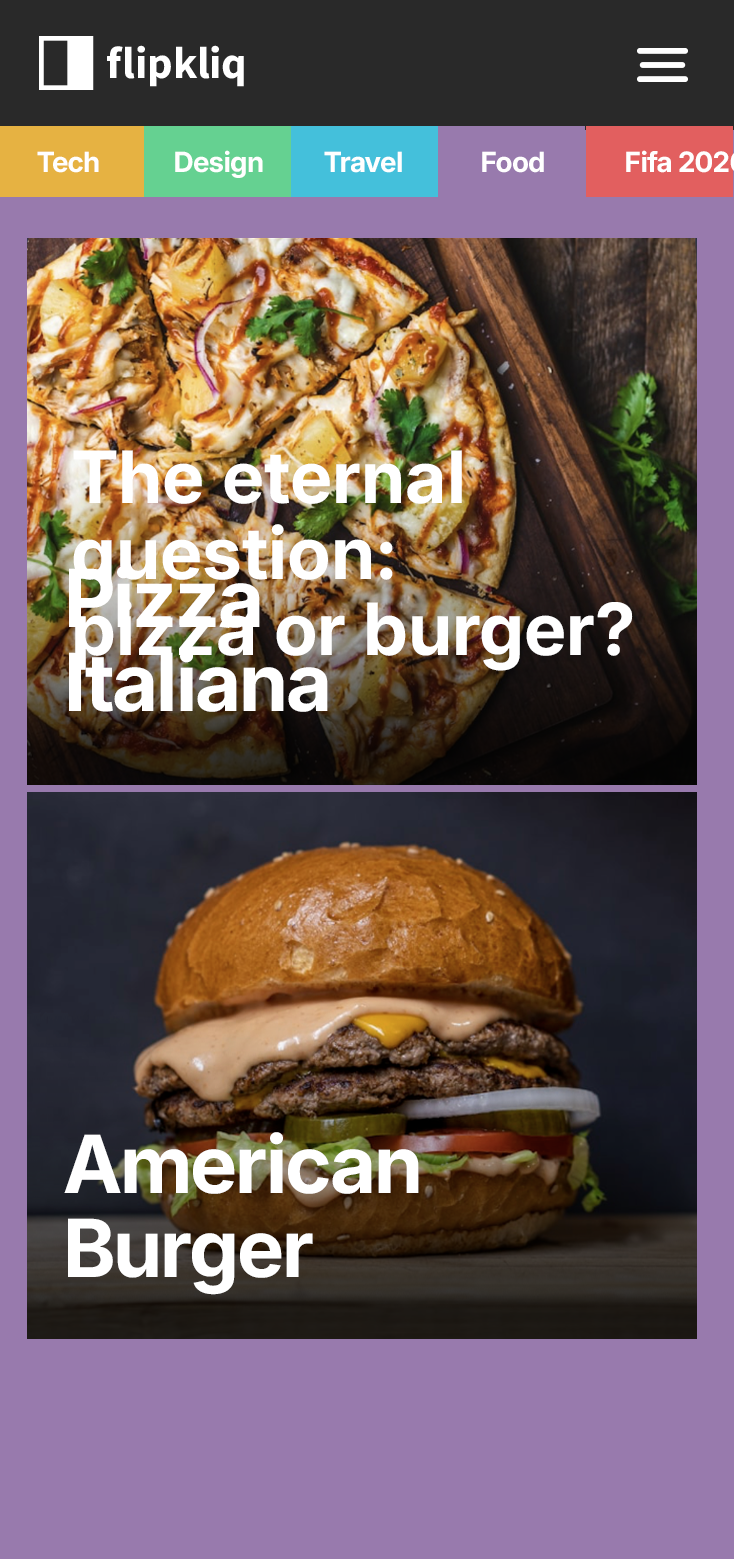
<style>
.page{position:relative;width:734px;height:1559px;background:#987aad}
.page>*{position:absolute;margin:0}
.t1{font:28px "Inter18pt-Bold";letter-spacing:-0.025em;color:#ffffff}
.t2{font:72px/76px "Inter18pt-Bold";color:#ffffff}
.t3{font:80px/84px "Inter18pt-Bold";letter-spacing:-0.025em;color:#ffffff}
</style>
<div class="page">
<p class="t1" style="left:175px;top:150px;width:88px;height:28px">Design</p>
<p class="t1" style="left:37px;top:151px;width:62px;height:22px">Tech</p>
<p class="t1" style="left:324px;top:151px;width:78px;height:22px">Travel</p>
<p class="t1" style="left:482px;top:151px;width:62px;height:22px">Food</p>
<p class="t2" style="left:73px;top:450px;width:560px;height:221px">The eternal question:<br>pizza or burger?</p>
<p class="t3" style="left:69px;top:566px;width:259px;height:146px">Pizza<br>Italiana</p>
<p class="t3" style="left:64px;top:1132px;width:355px;height:163px">American<br>Burger</p>
</div>
